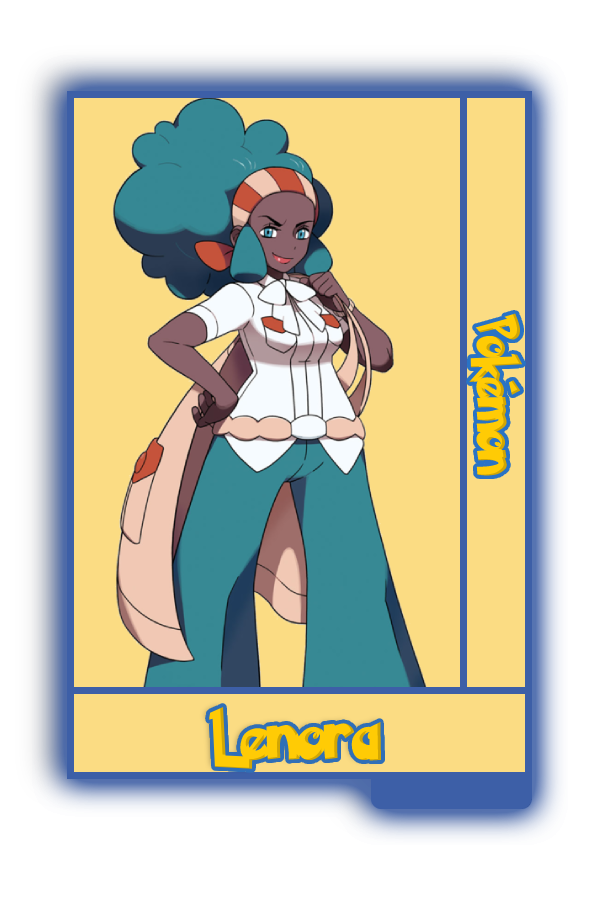
<style>
.page{position:relative;width:600px;height:900px;background:#fbdc83}
.page>*{position:absolute;margin:0}
.t1{font:48.8px "PokemonSolidNormal";color:#ffcb05;scale:0.8 1}
.t2{font:56.6px "PokemonSolidNormal";color:#ffcb05;scale:0.92 1}
</style>
<div class="page">
<p class="t1" style="left:469px;top:313px;width:54px;height:163px;rotate:90deg">Pokémon</p>
<p class="t2" style="left:208px;top:706px;width:174px;height:63px">Lenora</p>
</div>
